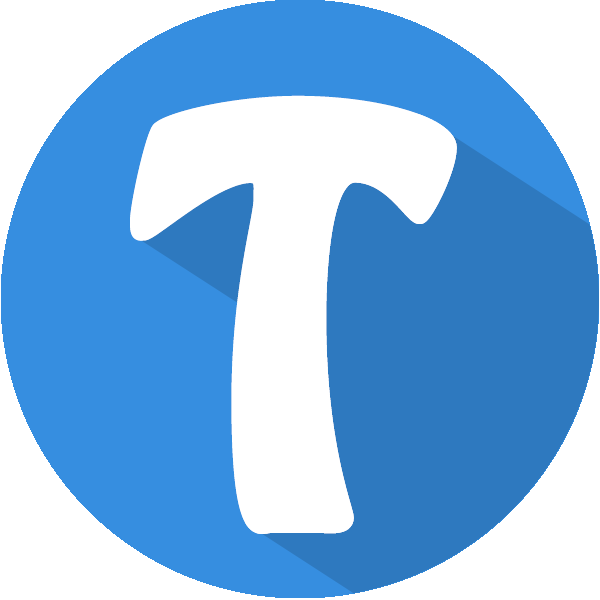
<style>
.page{position:relative;width:600px;height:600px;background:#ffffff}
.page>*{position:absolute;margin:0}
.t1{font:500px "HoboStd";color:#ffffff;font-weight:bold}
</style>
<div class="page">
<p class="t1" style="left:130px;top:95px;width:327px;height:439px">T</p>
</div>
